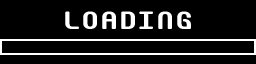
<style>
.page{position:relative;width:256px;height:64px;background:#000000}
.page>*{position:absolute;margin:0}
.t1{font:25px "GravitateBRK";letter-spacing:0.15em;color:#ffffff}
</style>
<div class="page">
<p class="t1" style="left:65px;top:11px;width:126px;height:18px">LOADING</p>
</div>
